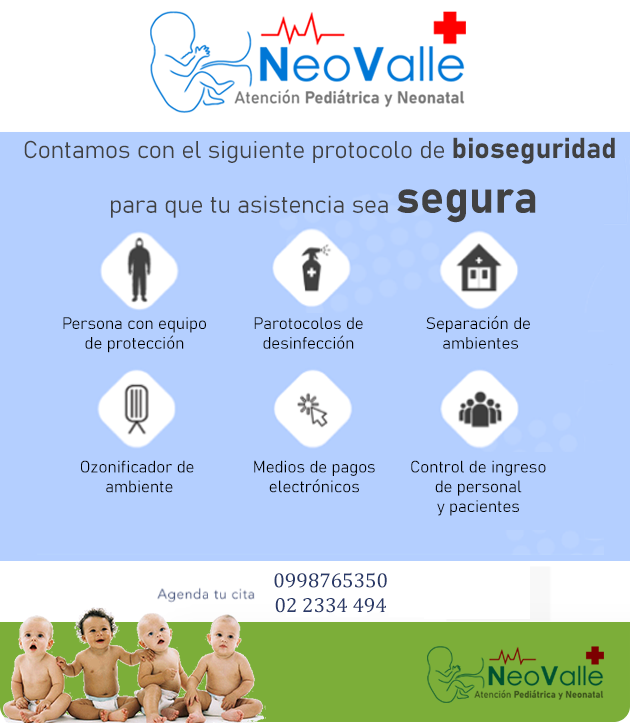
<style>
.page{position:relative;width:630px;height:723px;background:#b4cfff}
.page>*{position:absolute;margin:0}
.t1{font:23.9px "Bahnschrift";color:#414141}
.t2{font:28.6px "Bahnschrift-Bold";color:#414141}
.t3{font:45.7px "Bahnschrift-Bold";color:#414141}
.t4{font:16.5px "Bahnschrift-Bold";color:#000000}
.t5{font:20.7px "CambriaMath";color:#293968}
</style>
<div class="page">
<p class="t1" style="left:24px;top:137px;width:591px;height:86px;text-align:center">Contamos con el siguiente protocolo de <span class="t2">bioseguridad <br></span>para que tu asistencia sea <span class="t3">segura</span></p>
<p class="t4" style="left:63px;top:317px;width:143px;height:36px;text-align:center">Persona con equipo<br>de protección</p>
<p class="t4" style="left:254px;top:317px;width:109px;height:32px;text-align:center">Parotocolos de<br>desinfección</p>
<p class="t4" style="left:426px;top:315px;width:104px;height:34px;text-align:center">Separación de <br>ambientes</p>
<p class="t4" style="left:81px;top:460px;width:113px;height:33px;text-align:center">Ozonificador de <br>ambiente</p>
<p class="t4" style="left:254px;top:460px;width:121px;height:33px;text-align:center">Medios de pagos<br>electrónicos</p>
<p class="t4" style="left:411px;top:460px;width:135px;height:56px;text-align:center">Control de ingreso<br>de personal<br>y pacientes</p>
<p class="t5" style="left:274px;top:572px;width:113px;height:41px;text-align:center">0998765350<br>02 2334 494</p>
</div>
